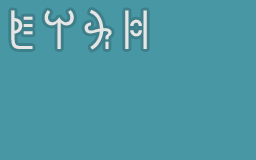
<style>
.page{position:relative;width:256px;height:160px;background:#4897a4}
.page>*{position:absolute;margin:0}
.t1{font:48px "NotoSansLinearB-Regular";letter-spacing:0.1em;color:#e6e6e6}
</style>
<div class="page">
<p class="t1" style="left:11px;top:10px;width:136px;height:40px">𐀽𐀬𐀓𐀝</p>
</div>
